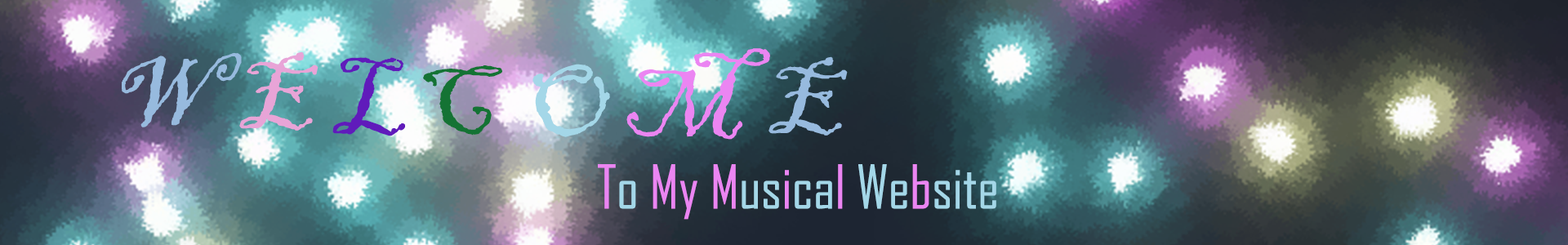
<style>
.page{position:relative;width:1568px;height:245px}
.page>*{position:absolute;margin:0}
.t1{font:102.1px "BlackadderITC-Regular";color:#97bade}
.t2{font:102.1px "BlackadderITC-Regular";color:#e8a4d7}
.t3{font:102.1px "BlackadderITC-Regular";color:#eb85f2}
.t4{font:102.1px "BlackadderITC-Regular";color:#601bbb}
.t5{font:102.1px "BlackadderITC-Regular";color:#147334}
.t6{font:102.1px "BlackadderITC-Regular";color:#a4d7e8}
.t7{font:57.8px "AgencyFB-Reg";color:#eb85f2}
.t8{font:57.8px "AgencyFB-Reg";color:#a4d7e8}
</style>
<div class="page">
<p class="t1" style="left:122px;top:52px;width:120px;height:75px">W</p>
<p class="t2" style="left:239px;top:51px;width:79px;height:80px">E</p>
<p class="t3" style="left:626px;top:48px;width:144px;height:92px">M</p>
<p class="t4" style="left:332px;top:57px;width:73px;height:79px">L</p>
<p class="t5" style="left:423px;top:65px;width:79px;height:71px">C</p>
<p class="t6" style="left:532px;top:64px;width:78px;height:73px">O</p>
<p class="t1" style="left:768px;top:56px;width:80px;height:80px">E</p>
<p class="t7" style="left:598px;top:164px;width:398px;height:56px">T<span class="t8">o</span> My M<span class="t8">us</span>i<span class="t8">ca</span>l <span class="t8">We</span>b<span class="t8">site</span></p>
</div>
